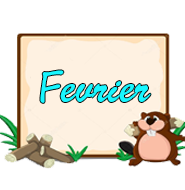
<style>
.page{position:relative;width:185px;height:190px;background:#ffffff}
.page>*{position:absolute;margin:0}
.t1{font:41.8px "BrushScriptStd";color:#18f7ff}
.t2{font:41.8px "SegoeScript";color:#18f7ff}
</style>
<div class="page">
<p class="t1" style="left:40px;top:70px;width:111px;height:33px"><span class="t2">F</span>evrier</p>
</div>
